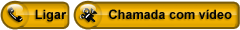
<style>
.page{position:relative;width:240px;height:30px}
.page>*{position:absolute;margin:0}
.t1{font:12.7px "Arial-BoldMT";color:#030303}
</style>
<div class="page">
<p class="t1" style="left:35px;top:9px;width:32px;height:13px">Ligar</p>
<p class="t1" style="left:109px;top:9px;width:123px;height:10px">Chamada com vídeo</p>
</div>
